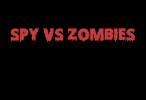
<style>
.page{position:relative;width:146px;height:100px;background:#000000}
.page>*{position:absolute;margin:0}
.t1{font:15px "ScaryHalloweenFont-Bold";color:#c23d3d;text-transform:uppercase}
</style>
<div class="page">
<p class="t1" style="left:10px;top:28px;width:125px;height:14px">spy vs zombies</p>
</div>
